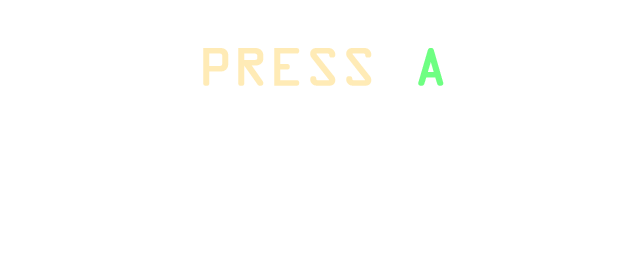
<style>
.page{position:relative;width:640px;height:256px;background:#ffffff}
.page>*{position:absolute;margin:0}
.t1{font:48px "OCRAStd";color:#ffebb6;font-weight:bold}
.t2{font:48px "OCRAStd";color:#6eff82;font-weight:bold}
</style>
<div class="page">
<p class="t1" style="left:203px;top:48px;width:241px;height:38px">PRESS <span class="t2">A</span></p>
</div>
